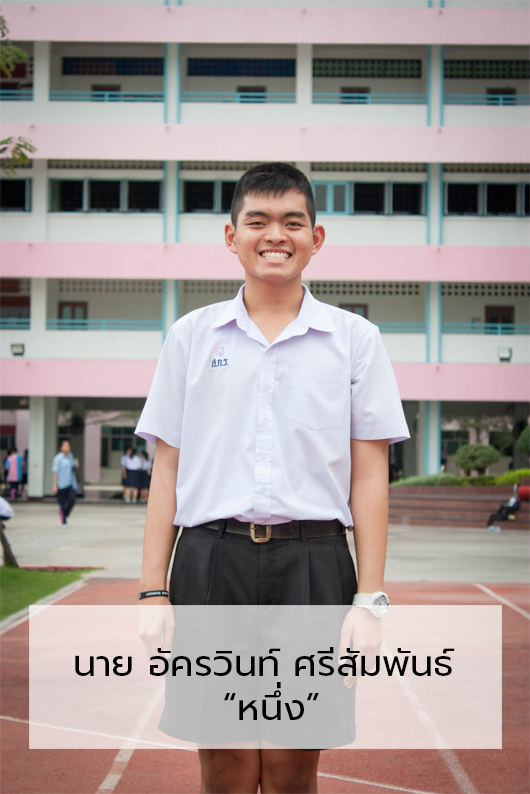
<style>
.page{position:relative;width:530px;height:794px}
.page>*{position:absolute;margin:0}
.t1{font:36.7px "Prompt-Regular";color:#000000}
</style>
<div class="page">
<p class="t1" style="left:75px;top:647px;width:380px;height:73px">นาย อัครวินท์ ศรีสัมพันธ์<br>           “หนึ่ง”</p>
</div>
